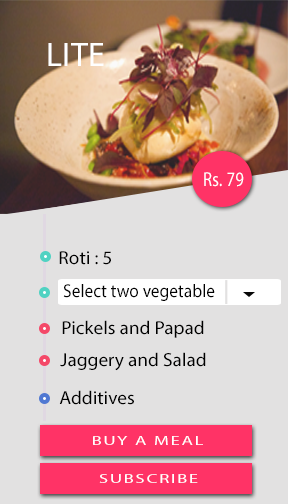
<style>
.page{position:relative;width:288px;height:504px;background:#e2e1e1}
.page>*{position:absolute;margin:0}
.t1{font:34px "MyriadPro-Regular";letter-spacing:0.015em;color:#ffffff}
.t2{font:20.2px "MyriadPro-Regular";letter-spacing:0.015em;color:#ffffff;scale:0.82 1}
.t3{font:18.8px "MyriadPro-Regular";color:#000000}
.t4{font:18.4px "MyriadPro-Regular";color:#000000;scale:0.95 1}
.t5{font:12.9px "MyriadPro-Regular";letter-spacing:0.1em;color:#ffffff;scale:1.43 1}
</style>
<div class="page">
<p class="t1" style="left:48px;top:43px;width:56px;height:23px">LITE</p>
<p class="t2" style="left:204px;top:172px;width:40px;height:15px">Rs. 79</p>
<p class="t3" style="left:59px;top:251px;width:52px;height:14px">Roti : 5</p>
<p class="t4" style="left:63px;top:284px;width:152px;height:17px">Select two vegetable</p>
<p class="t3" style="left:62px;top:320px;width:142px;height:18px">Pickels and Papad</p>
<p class="t3" style="left:60px;top:352px;width:146px;height:19px">Jaggery and Salad</p>
<p class="t3" style="left:59px;top:390px;width:75px;height:15px">Additives</p>
<p class="t5" style="left:93px;top:436px;width:110px;height:9px">BUY A MEAL</p>
<p class="t5" style="left:99px;top:474px;width:99px;height:9px">SUBSCRIBE</p>
</div>
